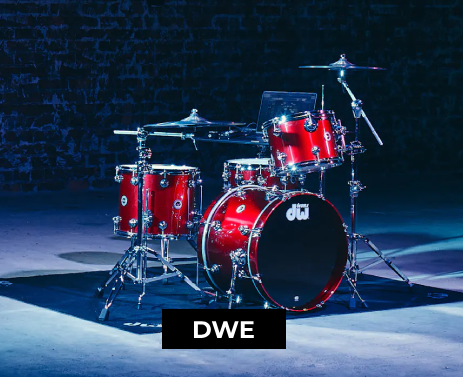
<style>
.page{position:relative;width:463px;height:377px}
.page>*{position:absolute;margin:0}
.t1{font:24px "Montserrat-Bold";color:#ffffff}
</style>
<div class="page">
<p class="t1" style="left:193px;top:321px;width:61px;height:17px">DWE</p>
</div>
